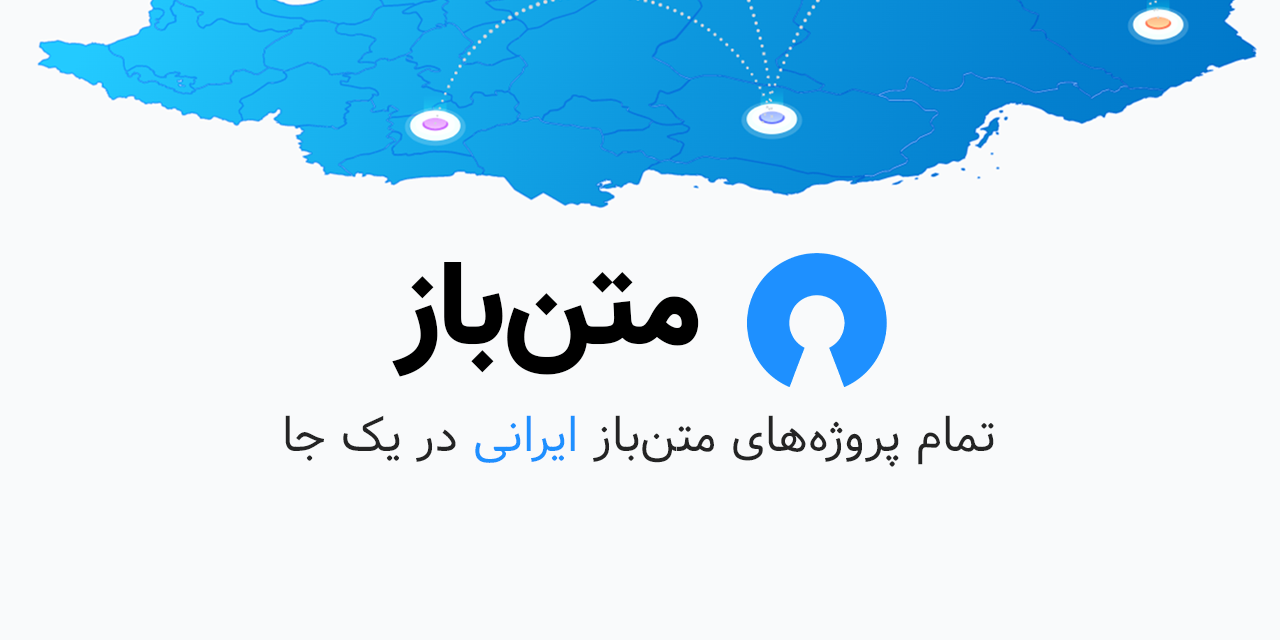
<style>
.page{position:relative;width:1280px;height:640px;background:#f9fafb}
.page>*{position:absolute;margin:0}
.t1{font:120px "Vazir-Black";color:#000000}
.t2{font:48px "Vazir";color:#242424}
.t3{font:48px "Vazir";color:#1e90ff}
</style>
<div class="page">
<p class="t1" style="left:392px;top:262px;width:307px;height:115px">متن‌باز</p>
<p class="t2" style="left:285px;top:415px;width:709px;height:52px">تمام پروژه‌های متن‌باز <span class="t3">ایرانی </span>در یک جا</p>
</div>
